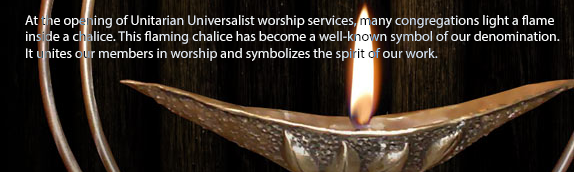
<style>
.page{position:relative;width:574px;height:172px}
.page>*{position:absolute;margin:0}
.t1{font:14px "MyriadPro-Regular";color:#ffffff}
</style>
<div class="page">
<p class="t1" style="left:25px;top:15px;width:535px;height:46px">At the opening of Unitarian Universalist worship services, many congregations light a flame <br>inside a chalice. This flaming chalice has become a well-known symbol of our denomination. <br>It unites our members in worship and symbolizes the spirit of our work.</p>
</div>
